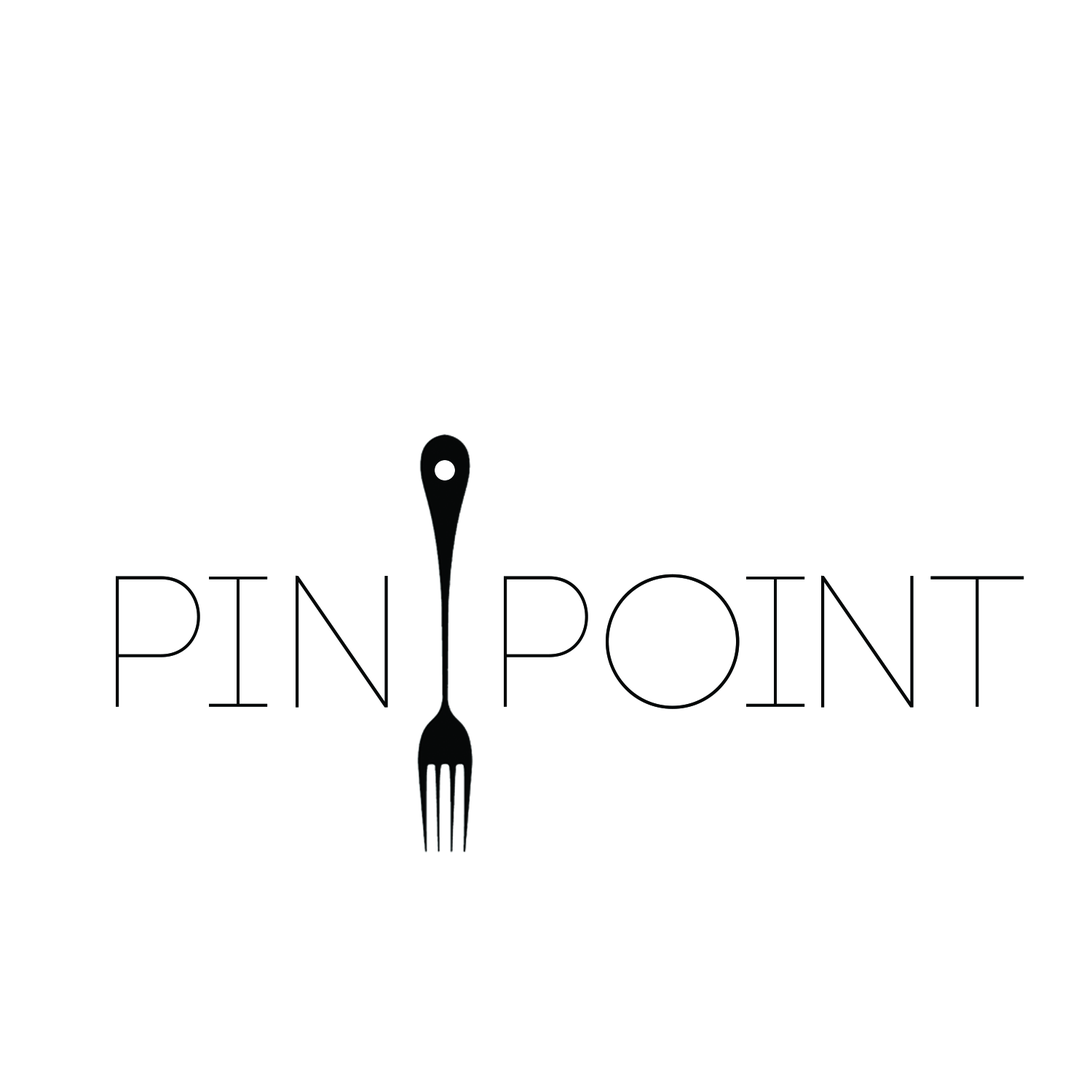
<style>
.page{position:relative;width:1092px;height:1092px;background:#ffffff}
.page>*{position:absolute;margin:0}
.t1{font:186.3px "Code-Light";color:#060808}
</style>
<div class="page">
<p class="t1" style="left:116px;top:574px;width:908px;height:135px">pin point</p>
</div>
